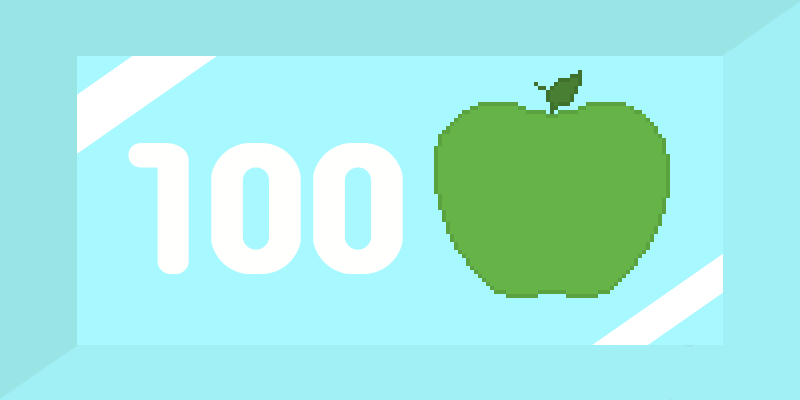
<style>
.page{position:relative;width:800px;height:400px;background:#a7f9ff}
.page>*{position:absolute;margin:0}
.t1{font:160px "Round_Pop";color:#fffffe}
</style>
<div class="page">
<p class="t1" style="left:128px;top:143px;width:275px;height:131px">100</p>
</div>
